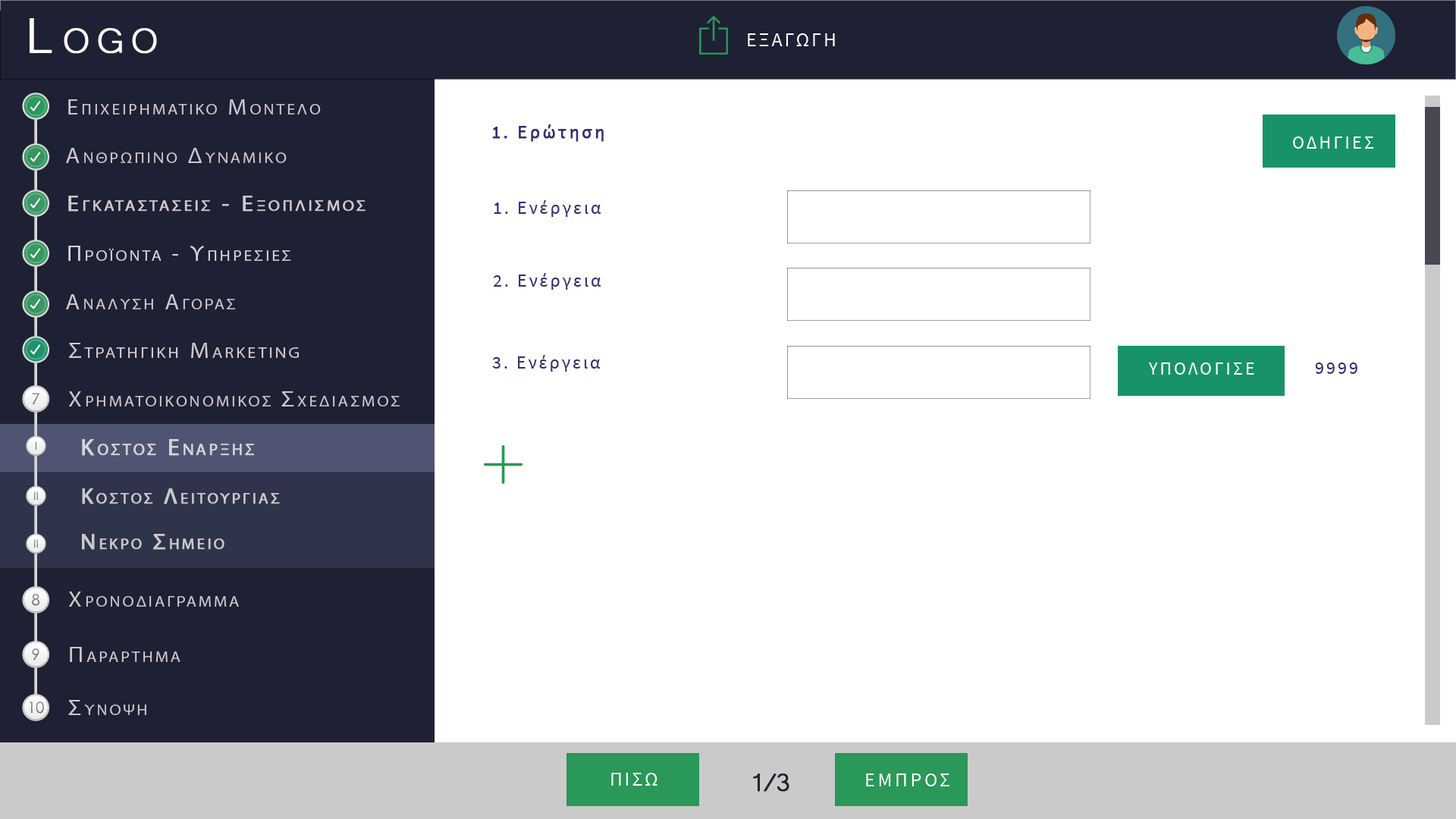
<style>
.page{position:relative;width:1456px;height:819px;background:#ffffff}
.page>*{position:absolute;margin:0}
.t1{font:63.7px "Microsoft-Yi-Baiti";letter-spacing:0.13em;color:#ffffff;font-variant:small-caps;font-weight:bold}
.t2{font:20px "SourceSansPro-Regular";letter-spacing:0.1em;color:#fefefe;text-transform:uppercase}
.t3{font:21.7px "MyriadPro-Regular";letter-spacing:0.13em;color:#cbcaca;font-variant:small-caps;scale:1.09 1}
.t4{font:23.4px "Microsoft-Yi-Baiti";letter-spacing:0.13em;color:#cbcaca;font-variant:small-caps;font-weight:bold}
.t5{font:18.2px "SourceSansPro-Regular";letter-spacing:0.13em;color:#2f2f70;font-weight:bold}
.t6{font:18.2px "SourceSansPro-Regular";letter-spacing:0.13em;color:#2f2f70;text-transform:uppercase;font-weight:bold}
.t7{font:18.2px "SourceSansPro-Regular";letter-spacing:0.13em;color:#ffffff;text-transform:uppercase}
.t8{font:21.7px/91px "MyriadPro-Regular";letter-spacing:0.13em;color:#cbcaca;font-variant:small-caps;font-weight:bold;scale:1.09 1}
.t9{font:23.4px/91px "Microsoft-Yi-Baiti";letter-spacing:0.13em;color:#cbcaca;font-variant:small-caps;font-weight:bold}
.t10{font:18.2px "SourceSansPro-Regular";letter-spacing:0.13em;color:#2f2f70}
.t11{font:18.2px "SourceSansPro-Regular";letter-spacing:0.13em;color:#2f2f70;text-transform:uppercase}
.t12{font:21.7px "MyriadPro-Regular";letter-spacing:0.13em;color:#d6d6d6;font-variant:small-caps;scale:1.09 1}
.t13{font:23.4px "Microsoft-Yi-Baiti";letter-spacing:0.13em;color:#d6d6d6;font-variant:small-caps;font-weight:bold}
.t14{font:22.2px "MyriadPro-Regular";letter-spacing:0.13em;color:#cbcaca;font-variant:small-caps;scale:1.09 1}
.t15{font:25.5px "Microsoft-Yi-Baiti";letter-spacing:0.13em;color:#cbcaca;font-variant:small-caps;font-weight:bold}
.t16{font:15.3px "CenturyGothic";color:#888888}
.t17{font:11.2px "CenturyGothic";color:#808080}
.t18{font:23.4px "MyriadPro-Regular";letter-spacing:0.13em;color:#d6d6d6;font-variant:small-caps;font-weight:bold}
.t19{font:11.2px "CenturyGothic";color:#828282}
.t20{font:22.3px "MyriadPro-Regular";letter-spacing:0.13em;color:#cbcaca;font-variant:small-caps;font-weight:bold}
.t21{font:15.3px "CenturyGothic";color:#8b8b8b}
.t22{font:15.3px "CenturyGothic";color:#838383}
.t23{font:23.7px "Microsoft-Yi-Baiti";letter-spacing:0.13em;color:#cbcaca;font-variant:small-caps;scale:1.09 1}
.t24{font:15.3px "CenturyGothic";color:#878787}
.t25{font:32.8px "Microsoft-Yi-Baiti";letter-spacing:-0.1em;color:#1e2133;font-weight:bold}
.t26{font:20px "SourceSansPro-Regular";letter-spacing:0.13em;color:#fefefe;text-transform:uppercase}
</style>
<div class="page">
<p class="t1" style="left:30px;top:18px;width:127px;height:36px">Logo</p>
<p class="t2" style="left:748px;top:33px;width:87px;height:13px">εξαγωγη</p>
<p class="t3" style="left:68px;top:99px;width:253px;height:16px"><span class="t4">   </span>Επιχειρηματικο Μοντελο</p>
<p class="t5" style="left:492px;top:124px;width:112px;height:18px"><span class="t6">1. </span>Ερώτηση</p>
<p class="t7" style="left:1293px;top:136px;width:81px;height:13px">Οδηγιεσ</p>
<p class="t3" style="left:66px;top:148px;width:221px;height:15px"><span class="t4">   </span>Ανθρωπινο Δυναμικο</p>
<p class="t8" style="left:68px;top:196px;width:298px;height:16px"><span class="t9">   </span>Εγκαταστασεισ - Εξοπλισμοσ<br><br><span class="t9">Equipment</span></p>
<p class="t10" style="left:494px;top:200px;width:107px;height:17px"><span class="t11">1. </span>Ενέργεια</p>
<p class="t12" style="left:68px;top:246px;width:223px;height:15px"><span class="t13">   </span>Προϊοντα - Υπηρεσιεσ</p>
<p class="t10" style="left:493px;top:273px;width:108px;height:17px"><span class="t11">2. </span>Ενέργεια</p>
<p class="t3" style="left:66px;top:294px;width:170px;height:15px"><span class="t4">   </span>Αναλυση Αγορασ</p>
<p class="t14" style="left:69px;top:343px;width:230px;height:15px"><span class="t15">   </span>Στρατηγικη Marketing</p>
<p class="t10" style="left:492px;top:355px;width:109px;height:17px"><span class="t11">3. </span>Ενέργεια</p>
<p class="t7" style="left:1149px;top:362px;width:105px;height:13px">υπολογισε</p>
<p class="t11" style="left:1315px;top:362px;width:42px;height:12px">9999</p>
<p class="t16" style="left:32px;top:393px;width:8px;height:12px">7</p>
<p class="t3" style="left:68px;top:391px;width:332px;height:15px"><span class="t15">   </span>Χρηματοικονομικοσ Σχεδιασμοσ</p>
<p class="t17" style="left:35px;top:441px;width:1px;height:9px">I</p>
<p class="t18" style="left:82px;top:439px;width:172px;height:17px">Κοστοσ Εναρξησ</p>
<p class="t19" style="left:34px;top:491px;width:4px;height:9px">II</p>
<p class="t20" style="left:82px;top:488px;width:198px;height:16px">Κοστοσ Λειτουργιασ</p>
<p class="t20" style="left:82px;top:534px;width:142px;height:16px">Νεκρο Σημειο</p>
<p class="t19" style="left:34px;top:539px;width:4px;height:9px">II</p>
<p class="t21" style="left:32px;top:594px;width:8px;height:12px">8</p>
<p class="t3" style="left:68px;top:591px;width:171px;height:16px"><span class="t15">   </span>Χρονοδιαγραμμα</p>
<p class="t22" style="left:32px;top:648px;width:7px;height:12px">9</p>
<p class="t3" style="left:70px;top:647px;width:110px;height:15px"><span class="t23">   </span>Παραρτημα</p>
<p class="t24" style="left:29px;top:701px;width:15px;height:13px">10</p>
<p class="t3" style="left:68px;top:700px;width:78px;height:15px"><span class="t23">   </span>Συνοψη</p>
<p class="t2" style="left:611px;top:773px;width:46px;height:13px">Πισω</p>
<p class="t25" style="left:753px;top:773px;width:36px;height:19px">1/3</p>
<p class="t26" style="left:866px;top:773px;width:83px;height:13px">εμπροσ</p>
</div>
